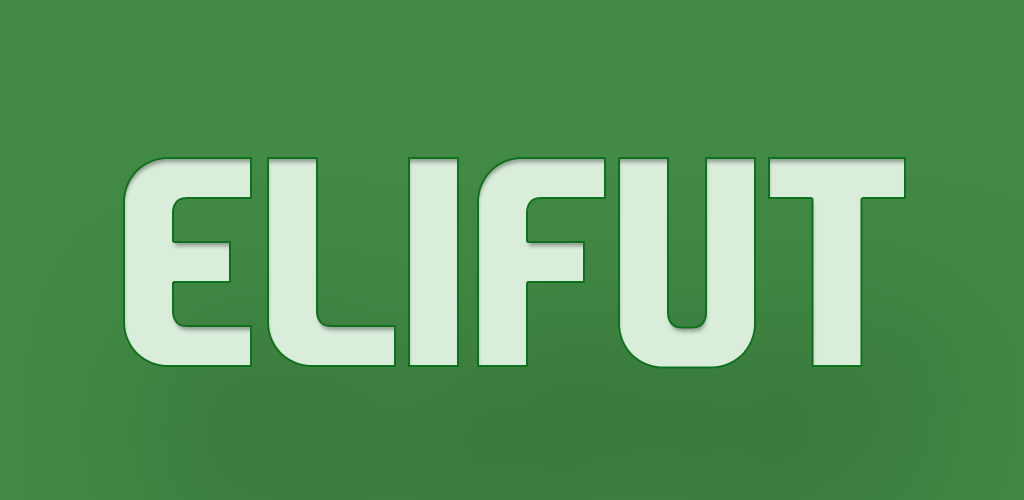
<style>
.page{position:relative;width:1024px;height:500px;background:#418944}
.page>*{position:absolute;margin:0}
.t1{font:300px "EASansCurves-Regular";color:#daeddb}
</style>
<div class="page">
<p class="t1" style="left:122px;top:157px;width:784px;height:212px">ELIFUT</p>
</div>
